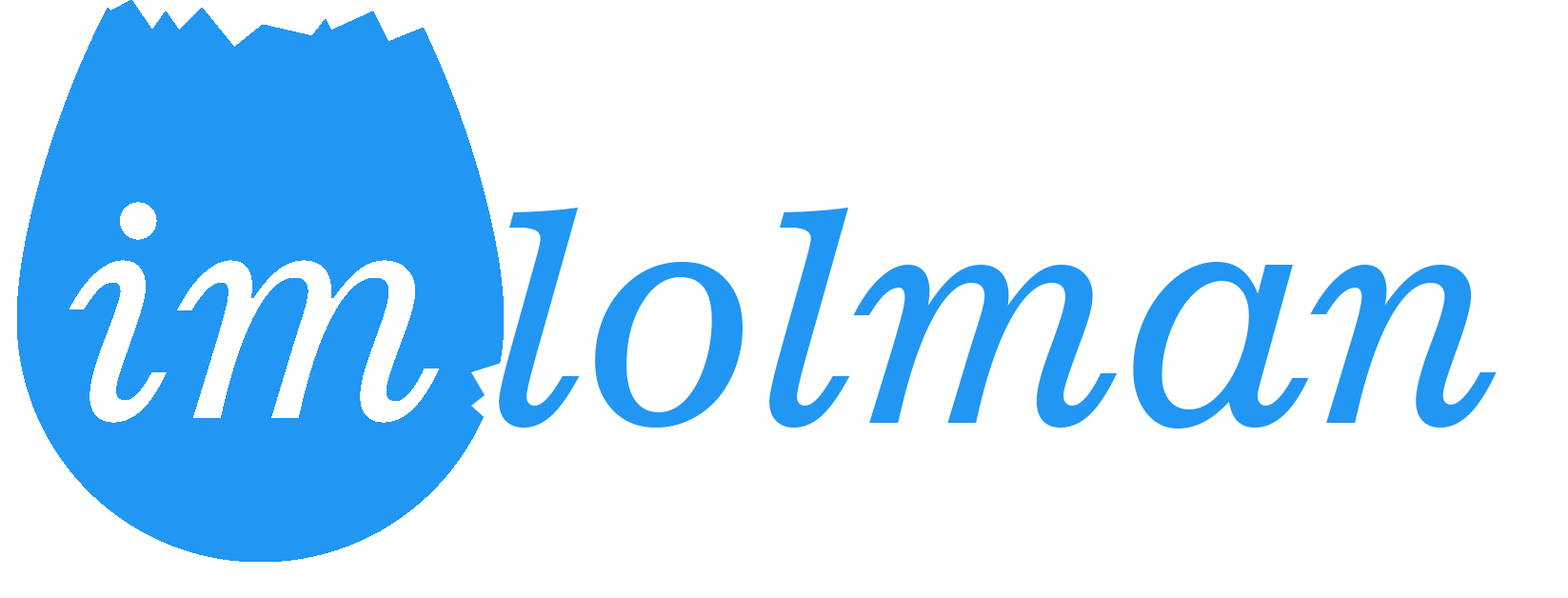
<style>
.page{position:relative;width:1568px;height:598px;background:#ffffff}
.page>*{position:absolute;margin:0}
.t1{font:285.6px "News701BT-ItalicA";color:#2196f3}
</style>
<div class="page">
<p class="t1" style="left:499px;top:208px;width:998px;height:220px">lolman</p>
</div>
